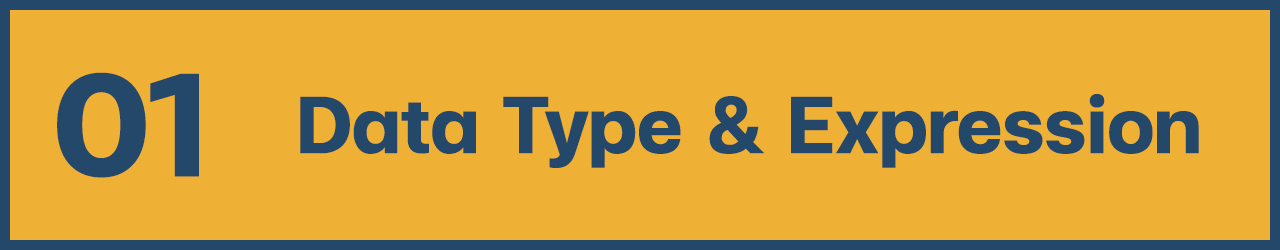
<style>
.page{position:relative;width:1280px;height:250px;background:#efb036}
.page>*{position:absolute;margin:0}
.t1{font:200px "FCMinimalBold";color:#23486a}
.t2{font:110px "FCMinimalBold";color:#23486a}
</style>
<div class="page">
<p class="t1" style="left:57px;top:72px;width:142px;height:106px">01</p>
<p class="t2" style="left:300px;top:94px;width:899px;height:74px">Data Type &amp; Expression</p>
</div>
